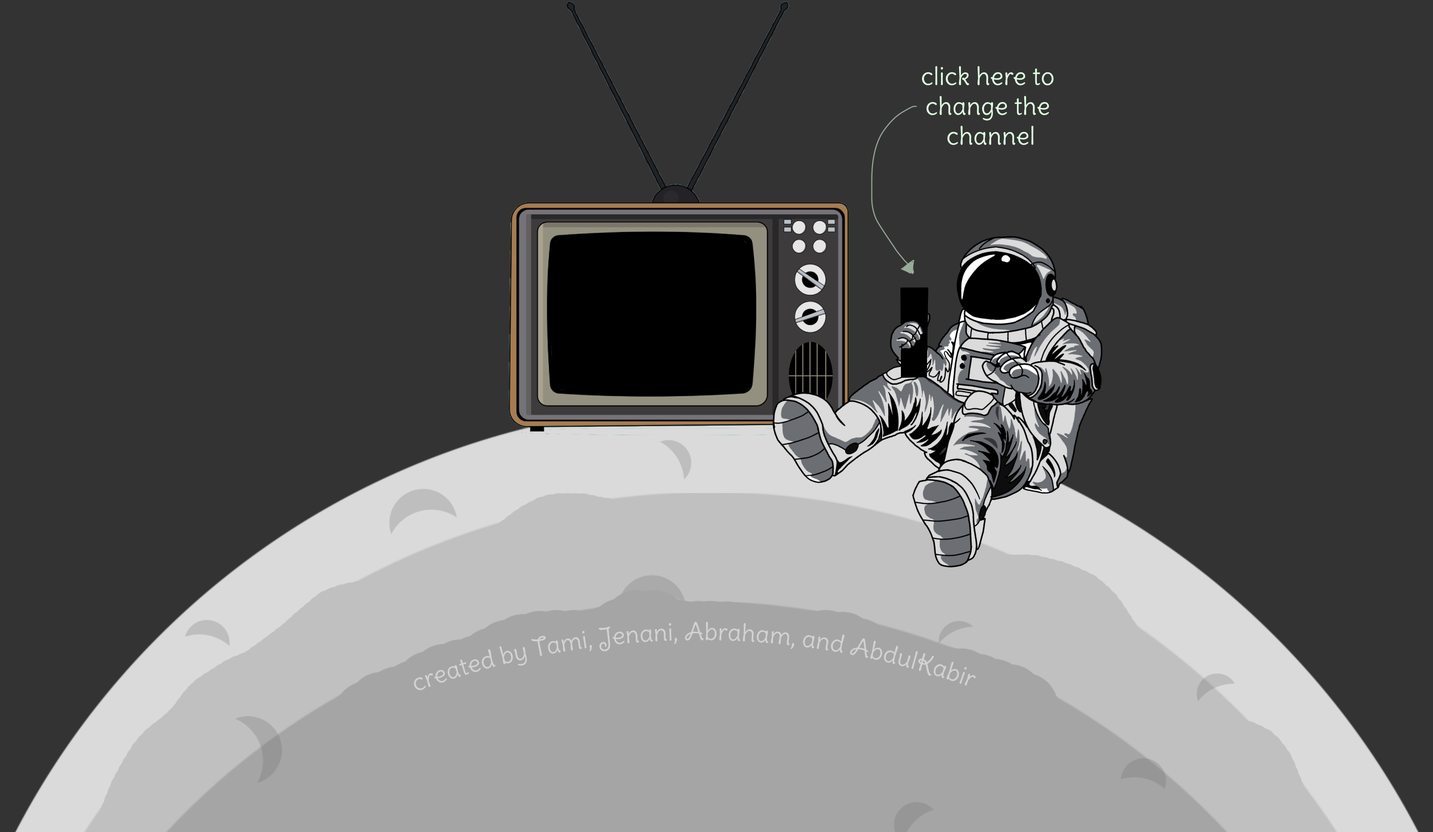
<style>
.page{position:relative;width:1433px;height:832px;background:#333333}
.page>*{position:absolute;margin:0}
.t1{font:24px "DeliusSwashCaps-Regular";color:#d2d2d2}
</style>
<div class="page">
<p class="t1" style="left:414px;top:621px;width:563px;height:69px">created by Tami, Jenani, Abraham, and AbdulKabir</p>
</div>
